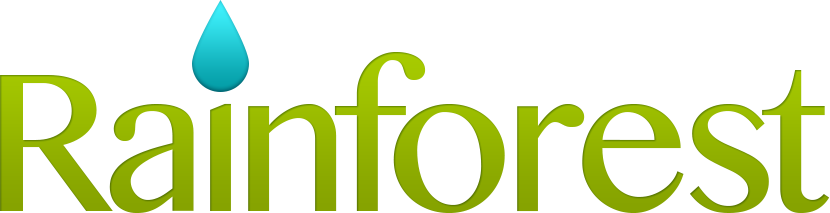
<style>
.page{position:relative;width:830px;height:213px;background:#ffffff}
.page>*{position:absolute;margin:0}
.t1{font:200px "OriyaMN";letter-spacing:-0.04em;color:#94b400}
.t2{font:200px "OriyaMN";letter-spacing:-0.06em;color:#94b400}
.t3{font:200px "OriyaMN";letter-spacing:-0.08em;color:#94b400}
.t4{font:200px "OriyaMN";letter-spacing:-0.12em;color:#94b400}
</style>
<div class="page">
<p class="t1" style="left:0px;top:52px;width:830px;height:161px">R<span class="t2">a</span>i<span class="t3">n</span><span class="t4">f</span>ore<span class="t3">s</span>t</p>
</div>
